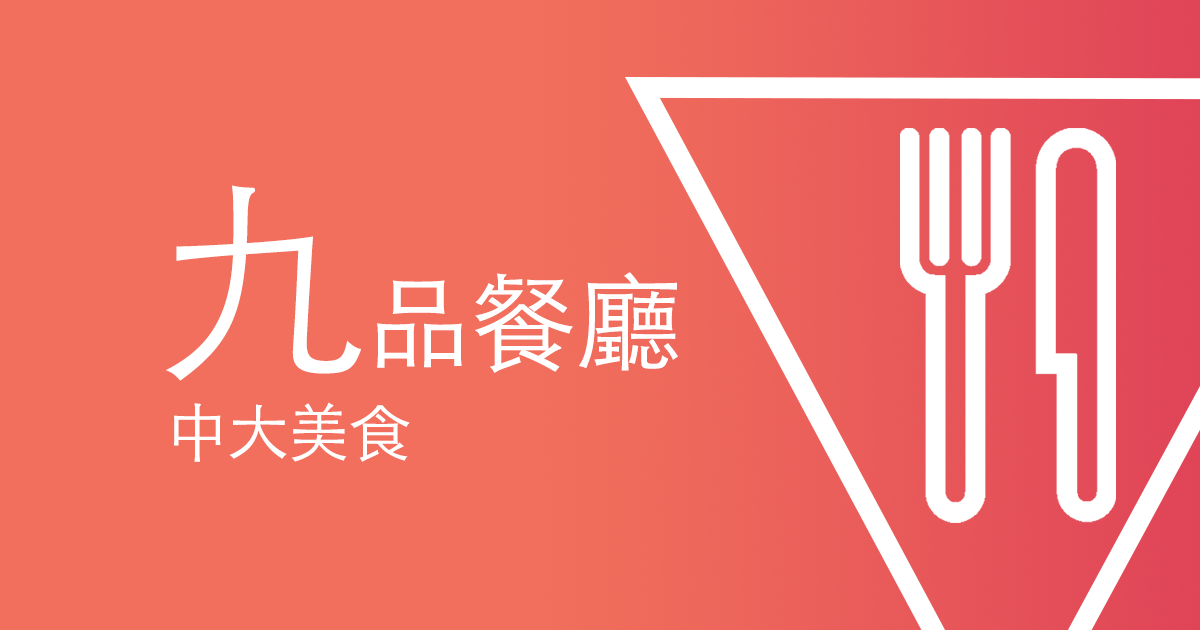
<style>
.page{position:relative;width:1200px;height:630px;background:#f16f5c}
.page>*{position:absolute;margin:0}
.t1{font:106.7px "STHeitiTC-Light";letter-spacing:-0.02em;color:#ffffff}
.t2{font:213.3px "STHeitiTC-Light";letter-spacing:-0.02em;color:#ffffff}
.t3{font:62.2px "STHeitiTC-Light";letter-spacing:-0.02em;color:#ffffff}
</style>
<div class="page">
<p class="t1" style="left:166px;top:185px;width:512px;height:196px"><span class="t2">九</span>品餐廳</p>
<p class="t3" style="left:174px;top:402px;width:236px;height:60px">中大美食</p>
</div>
